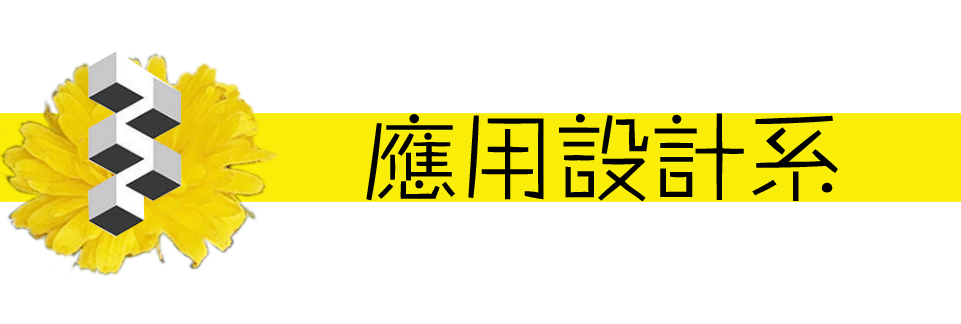
<style>
.page{position:relative;width:961px;height:324px;background:#ffffff}
.page>*{position:absolute;margin:0}
.t1{font:95.9px "FZZHYFW--GB1-0";color:#000000}
</style>
<div class="page">
<p class="t1" style="left:366px;top:113px;width:472px;height:89px">应用设计系</p>
</div>
